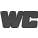
<style>
.page{position:relative;width:38px;height:38px;background:#ffffff}
.page>*{position:absolute;margin:0}
.t1{font:28px "Yukarimobile";color:#4c4c4d}
</style>
<div class="page">
<p class="t1" style="left:1px;top:12px;width:37px;height:15px">wc</p>
</div>
